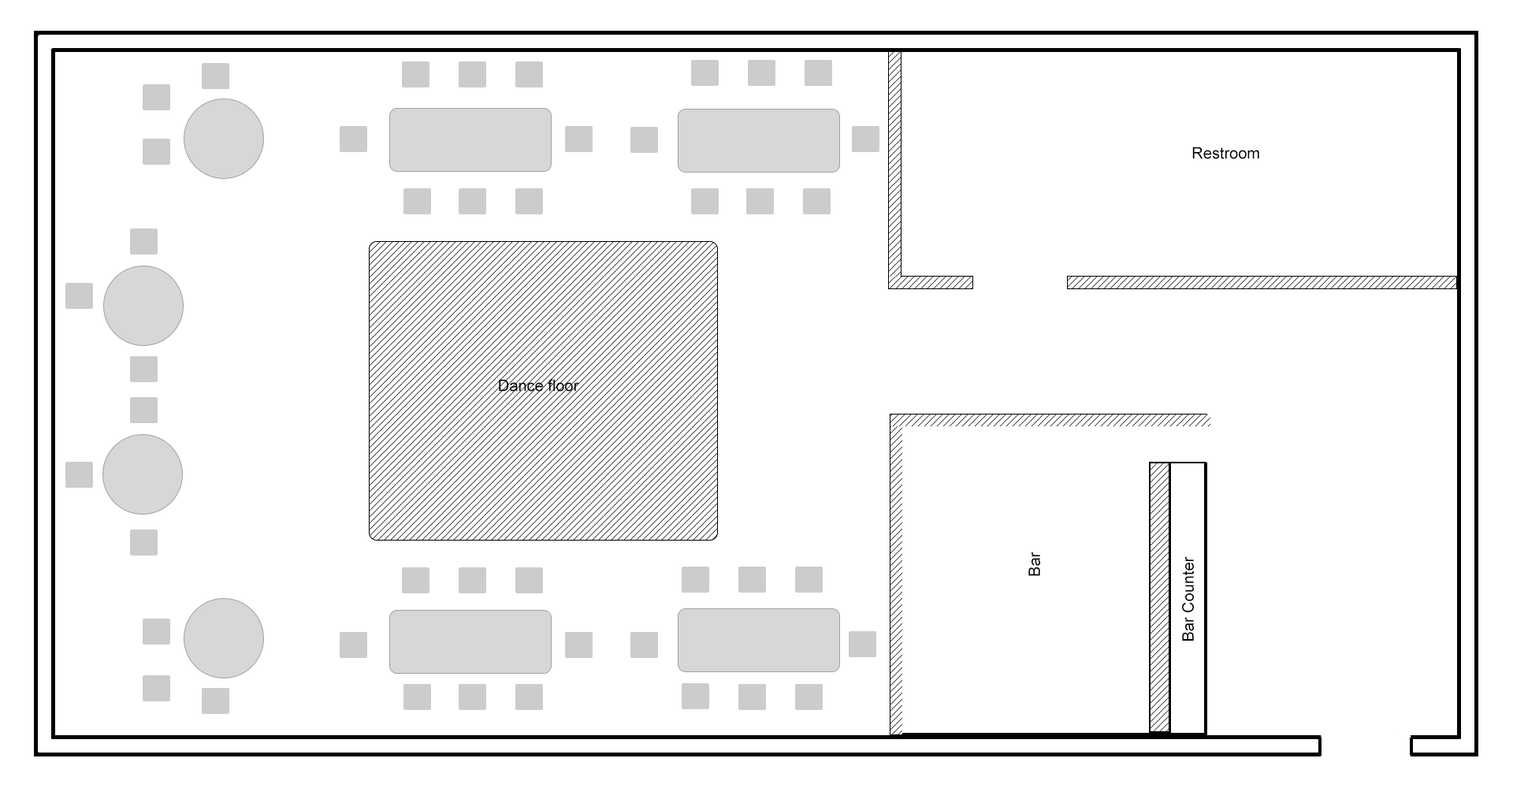
<style>
.page{position:relative;width:1513px;height:788px;background:#ffffff}
.page>*{position:absolute;margin:0}
.t1{font:15.8px "ArialMT";color:#000000}
</style>
<div class="page">
<p class="t1" style="left:1192px;top:147px;width:67px;height:12px">Restroom</p>
<p class="t1" style="left:499px;top:379px;width:80px;height:13px">Dance floor</p>
<p class="t1" style="left:1028px;top:552px;width:12px;height:24px;rotate:-90deg">Bar</p>
<p class="t1" style="left:1182px;top:556px;width:12px;height:85px;rotate:-90deg">Bar Counter</p>
</div>
